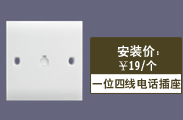
<style>
.page{position:relative;width:183px;height:120px;background:#65657d}
.page>*{position:absolute;margin:0}
.t1{font:12.6px "HeitiCSEG";color:#ffffff}
.t2{font:11.1px "HeitiCSEG";color:#ffffff}
.t3{font:11.1px "HeitiCSEG";color:#4b4221}
</style>
<div class="page">
<p class="t1" style="left:117px;top:45px;width:42px;height:13px">安装价：</p>
<p class="t2" style="left:119px;top:60px;width:38px;height:11px">￥19/个</p>
<p class="t3" style="left:92px;top:78px;width:89px;height:11px">一位四线电话插座</p>
</div>
